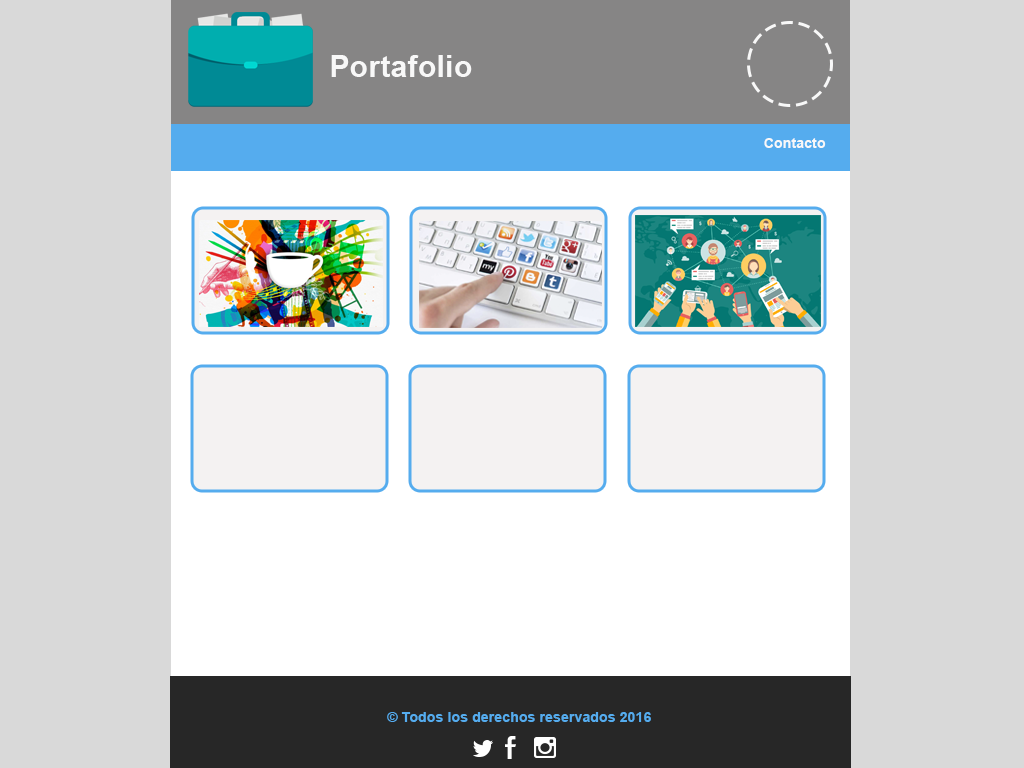
<style>
.page{position:relative;width:1024px;height:768px;background:#d9d9d9}
.page>*{position:absolute;margin:0}
.t1{font:30px "Arial-BoldMT";letter-spacing:0.01em;color:#f8f8f8}
.t2{font:14px "Arial-BoldMT";letter-spacing:0.01em;color:#f8f8f8}
.t3{font:14px "Arial-BoldMT";letter-spacing:0.01em;color:#55acee}
</style>
<div class="page">
<p class="t1" style="left:331px;top:55px;width:141px;height:22px">Portafolio</p>
<p class="t2" style="left:764px;top:138px;width:62px;height:10px">Contacto</p>
<p class="t3" style="left:387px;top:712px;width:264px;height:10px">© Todos los derechos reservados 2016</p>
</div>
